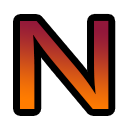
<style>
.page{position:relative;width:128px;height:128px;background:#ffffff}
.page>*{position:absolute;margin:0}
.t1{font:130.1px "MyriadPro-Regular";scale:1.34 1}
</style>
<div class="page">
<p class="t1" style="left:20px;top:20px;width:89px;height:89px">N</p>
</div>
